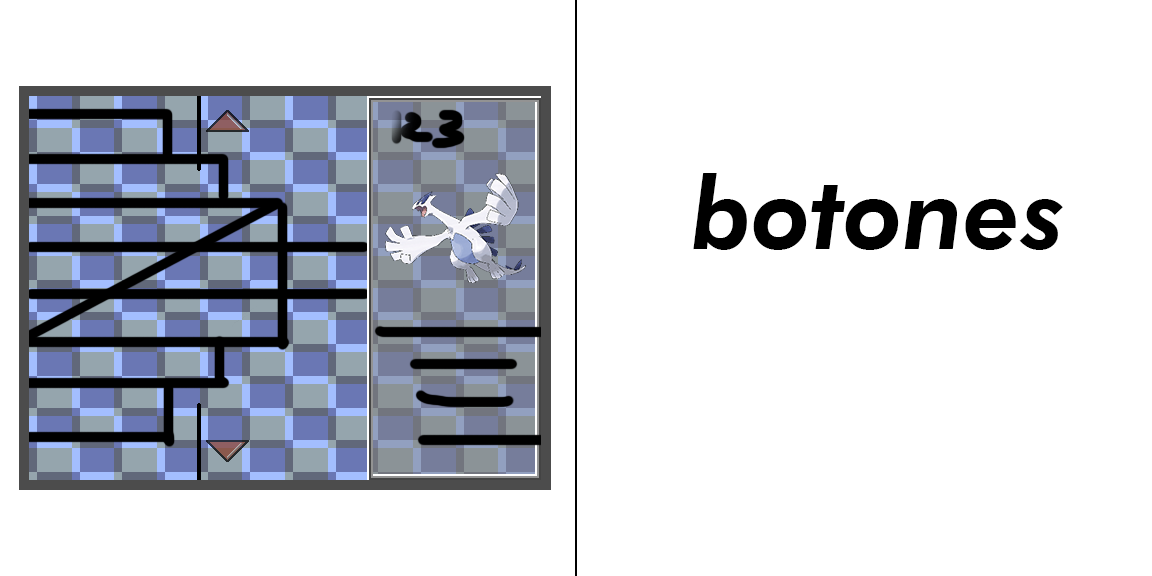
<style>
.page{position:relative;width:1152px;height:576px;background:#ffffff}
.page>*{position:absolute;margin:0}
.t1{font:100px "FuturaBT-HeavyItalic";color:#000000}
</style>
<div class="page">
<p class="t1" style="left:693px;top:173px;width:370px;height:77px">botones</p>
</div>
